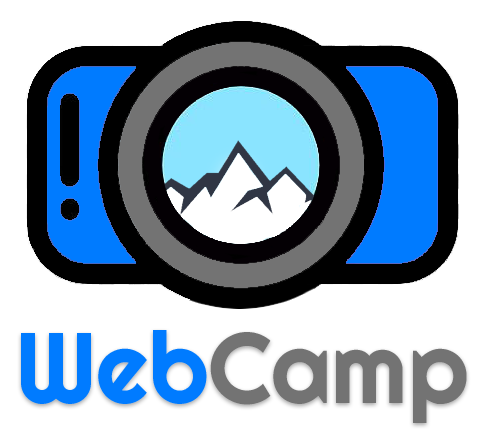
<style>
.page{position:relative;width:485px;height:436px;background:#ffffff}
.page>*{position:absolute;margin:0}
.t1{font:100px "Righteous-Regular";color:#737373}
.t2{font:100px "Righteous-Regular";color:#007bff}
</style>
<div class="page">
<p class="t1" style="left:21px;top:330px;width:446px;height:93px"><span class="t2">Web</span>Camp</p>
</div>
